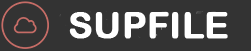
<style>
.page{position:relative;width:251px;height:51px;background:#333333}
.page>*{position:absolute;margin:0}
.t1{font:36px "ArialRoundedMTBold";color:#ffffff;font-weight:bold}
</style>
<div class="page">
<p class="t1" style="left:69px;top:12px;width:159px;height:27px">SUPFILE</p>
</div>
